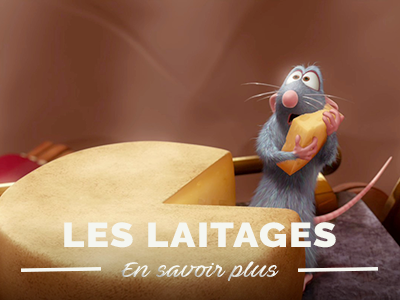
<style>
.page{position:relative;width:400px;height:300px}
.page>*{position:absolute;margin:0}
.t1{font:34.5px "Raleway-Black";letter-spacing:0.04em;color:#f5f6f0;scale:1.11 1}
.t2{font:20.7px "AveBetwanPERSONALUSEONLY";letter-spacing:0.04em;color:#f5f6f0;scale:1.11 1}
</style>
<div class="page">
<p class="t1" style="left:64px;top:222px;width:272px;height:26px">LES LAITAGES</p>
<p class="t2" style="left:121px;top:261px;width:158px;height:20px">En savoir plus</p>
</div>
